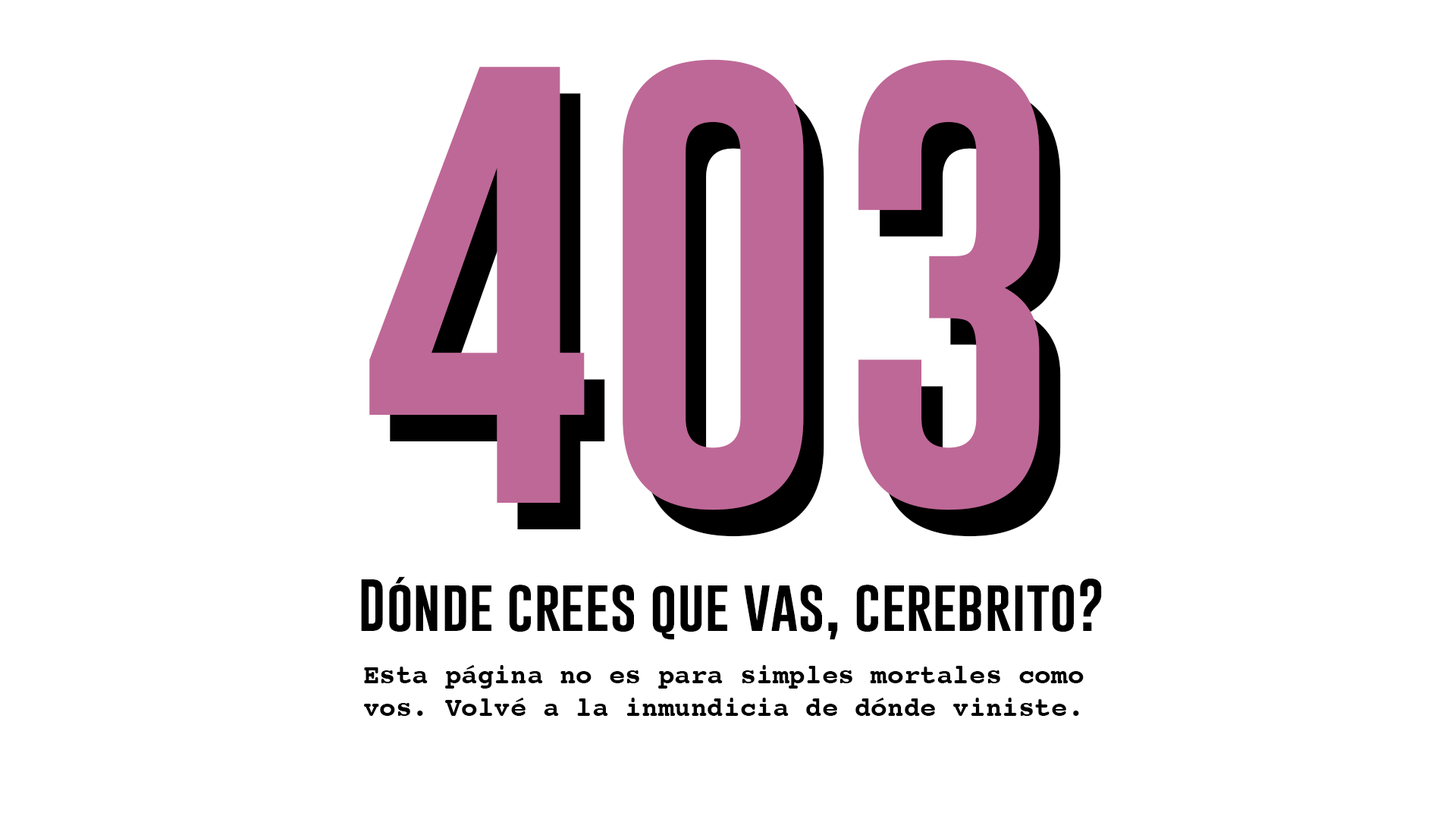
<style>
.page{position:relative;width:1456px;height:819px;background:#ffffff}
.page>*{position:absolute;margin:0}
.t1{font:455px "Gobold";color:#be6897}
.t2{font:455px "Gobold"}
.t3{font:53.8px "Gobold";color:#000000}
.t4{font:27.3px "Courier-Bold";color:#000000}
</style>
<div class="page">
<p class="t1" style="left:369px;top:59px;width:671px;height:451px">403</p>
<p class="t2" style="left:390px;top:86px;width:671px;height:451px">403</p>
<p class="t3" style="left:361px;top:576px;width:741px;height:64px">Dónde crees que vas, cerebrito?</p>
<p class="t4" style="left:364px;top:665px;width:720px;height:51px;text-align:center">Esta página no es para simples mortales como vos. Volvé a la inmundicia de dónde viniste.</p>
</div>
